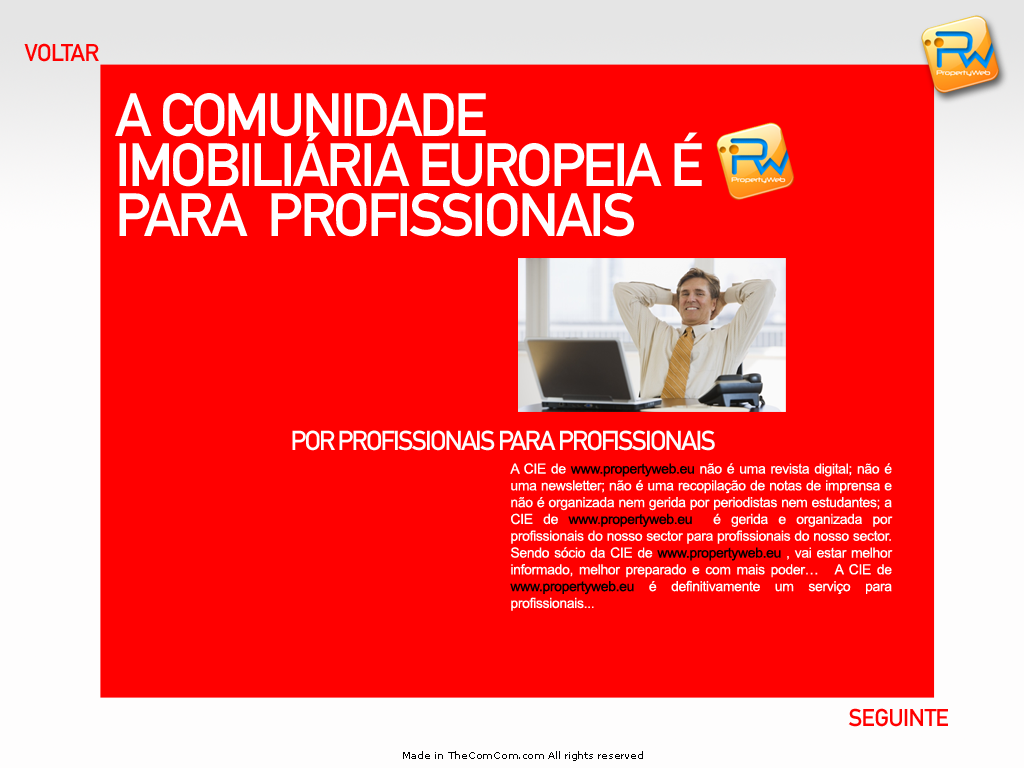
<style>
.page{position:relative;width:1024px;height:768px;background:#ff0000}
.page>*{position:absolute;margin:0}
.t1{font:24px "DINMittelschriftStd";letter-spacing:-0.025em;color:#ff0000}
.t2{font:60px/50px "DINMittelschriftStd";letter-spacing:-0.05em;color:#ffffff}
.t3{font:27px "DINMittelschriftStd";letter-spacing:-0.075em;color:#fefdfd}
.t4{font:14px "ArialMT";letter-spacing:-0.025em;color:#ffffff}
.t5{font:14px "ArialMT";letter-spacing:-0.025em;color:#000000}
.t6{font:10px "MSReferenceSansSerif";letter-spacing:-0.025em;color:#010101}
</style>
<div class="page">
<p class="t1" style="left:24px;top:43px;width:75px;height:19px">VOLTAR</p>
<p class="t2" style="left:115px;top:93px;width:587px;height:144px">A COMUNIDADE IMOBILIÁRIA EUROPEIA É PARA  PROFISSIONAIS</p>
<p class="t3" style="left:292px;top:430px;width:423px;height:21px">POR PROFISSIONAIS PARA PROFISSIONAIS</p>
<p class="t4" style="left:510px;top:463px;width:383px;height:148px;text-align:justify">A CIE de <span class="t5">www.propertyweb.eu</span> não é uma revista digital; não é uma newsletter; não é uma recopilação de notas de imprensa e não é organizada nem gerida por periodistas nem estudantes; a CIE de <span class="t5">www.propertyweb.eu</span>  é gerida e organizada por profissionais do nosso sector para profissionais do nosso sector.  Sendo sócio da CIE de <span class="t5">www.propertyweb.eu</span> , vai estar melhor informado, melhor preparado e com mais poder…   A CIE de <span class="t5">www.propertyweb.eu</span> é definitivamente um serviço para profissionais...</p>
<p class="t1" style="left:848px;top:708px;width:100px;height:19px">SEGUINTE</p>
<p class="t6" style="left:403px;top:751px;width:240px;height:10px">Made in TheComCom.com All rights reserved</p>
</div>
